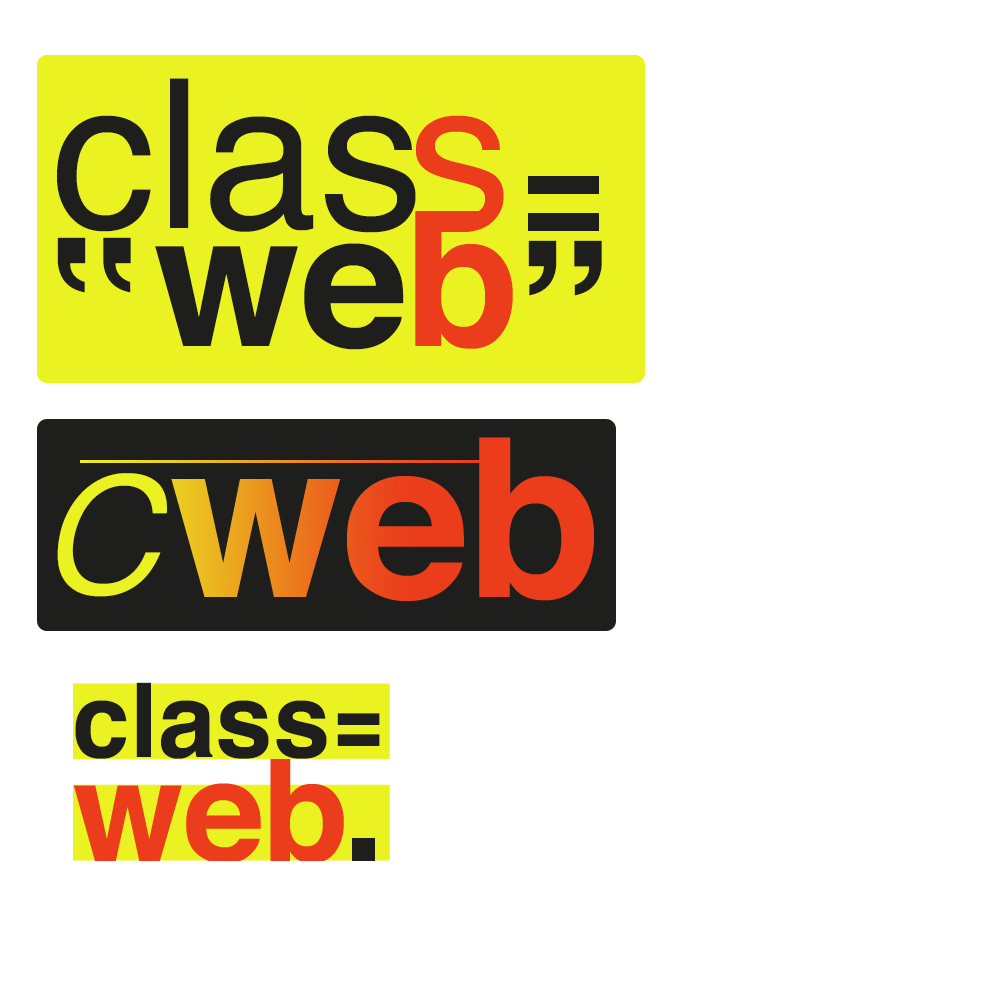
<style>
.page{position:relative;width:1000px;height:1000px;background:#ffffff}
.page>*{position:absolute;margin:0}
.t1{font:208.3px "Helvetica";color:#1e1f1c}
.t2{font:187.5px "Helvetica-Bold";color:#1e1f1c}
.t3{font:187.5px "Helvetica-Bold";color:#eb3d1b}
.t4{font:198.2px "Helvetica-Bold";color:#1e1f1c}
.t5{font:198.2px "Helvetica-Light";color:#eb3d1b}
.t6{font:225.2px "Helvetica-LightOblique";color:#ebf221}
.t7{font:103.1px "Helvetica-Bold";color:#1e1f1c}
.t8{font:91.7px "Helvetica-Bold";color:#1e1f1c;scale:0.86 1}
</style>
<div class="page">
<p class="t1" style="left:56px;top:78px;width:360px;height:155px">clas</p>
<p class="t2" style="left:155px;top:211px;width:358px;height:139px">we<span class="t3">b</span></p>
<p class="t4" style="left:57px;top:237px;width:74px;height:56px"><span class="t5"><br></span>‟</p>
<p class="t4" style="left:528px;top:240px;width:74px;height:56px">”</p>
<p class="t6" style="left:57px;top:473px;width:110px;height:124px">c</p>
<p class="t7" style="left:75px;top:682px;width:252px;height:77px">class</p>
<p class="t8" style="left:337px;top:713px;width:43px;height:33px">=</p>
</div>
